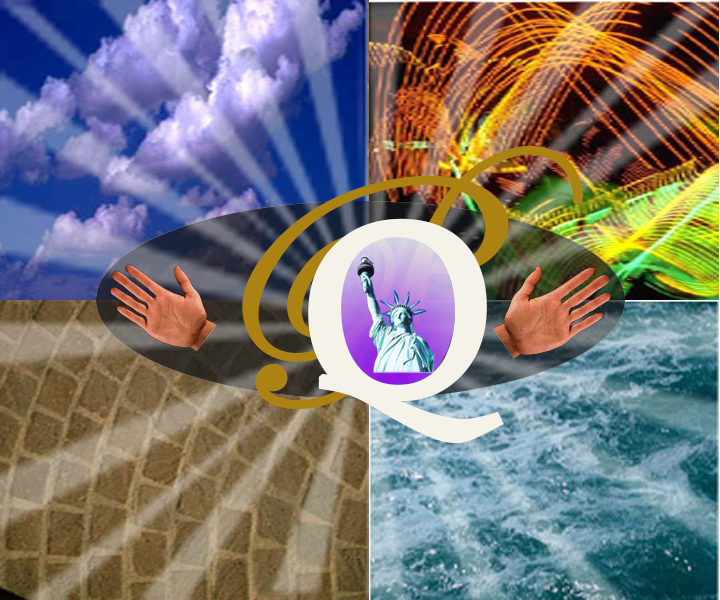
<style>
.page{position:relative;width:720px;height:600px}
.page>*{position:absolute;margin:0}
.t1{font:246.1px "CalistoMT";color:#f5f2e9;font-weight:bold}
</style>
<div class="page">
<p class="t1" style="left:308px;top:218px;width:196px;height:226px">Q</p>
</div>
